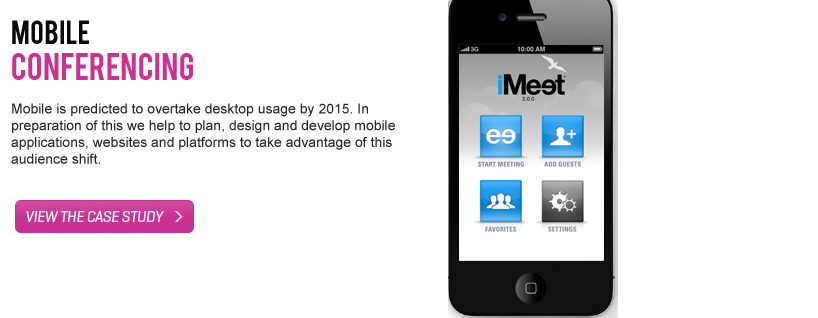
<style>
.page{position:relative;width:818px;height:318px;background:#ffffff}
.page>*{position:absolute;margin:0}
.t1{font:14px "ArialMT";color:#262525}
.t2{font:18px "ArialMT";color:#000000}
.t3{font:26px "Bebas";color:#0b0b0b}
.t4{font:30px "Bebas";color:#ce3091}
</style>
<div class="page">
<p class="t1" style="left:11px;top:20px;width:384px;height:144px"><span class="t2"> <br></span><span class="t3">MObile<br></span><span class="t4">Conferencing<br><br></span>Mobile is predicted to overtake desktop usage by 2015. In preparation of this we help to plan, design and develop mobile applications, websites and platforms to take advantage of this audience shift.</p>
</div>
